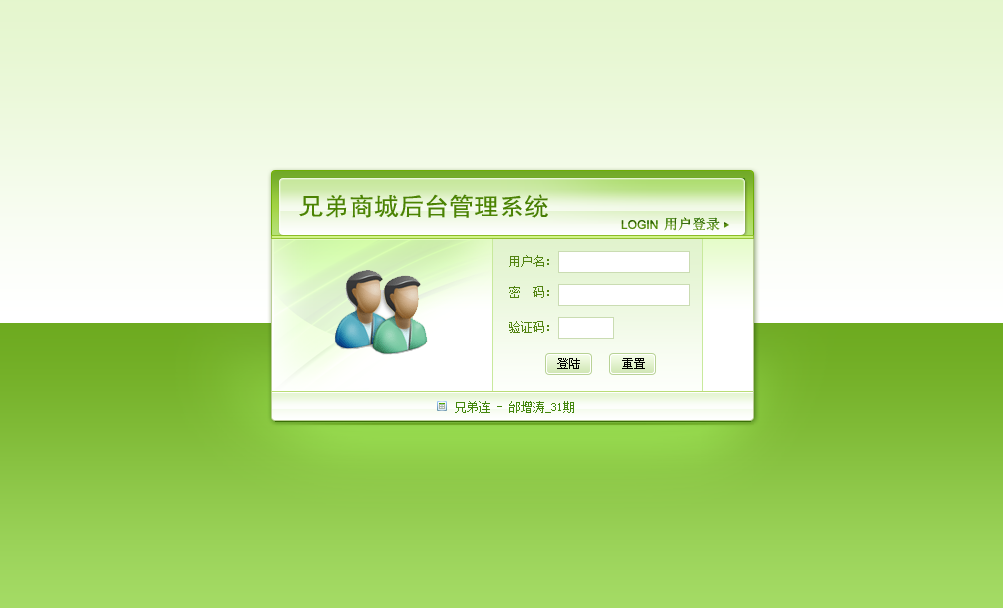
<style>
.page{position:relative;width:1003px;height:608px}
.page>*{position:absolute;margin:0}
.t1{font:25px "FZHTJW--GB1-0";color:#4b8303}
.t2{font:12px "ArialMT"}
.t3{font:14px "SimSun"}
.t4{font:12px "SimSun";color:#528311}
.t5{font:12px "SimSun";color:#000000}
.t6{font:12px "SimSun";color:#43860c}
</style>
<div class="page">
<p class="t1" style="left:299px;top:194px;width:249px;height:24px">兄弟商城后台管理系统</p>
<p class="t2" style="left:621px;top:220px;width:37px;height:10px">LOGIN</p>
<p class="t3" style="left:664px;top:217px;width:56px;height:14px">用户登录</p>
<p class="t4" style="left:509px;top:255px;width:40px;height:12px">用户名：</p>
<p class="t4" style="left:509px;top:286px;width:40px;height:12px">密　码：</p>
<p class="t4" style="left:509px;top:321px;width:40px;height:12px">验证码：</p>
<p class="t5" style="left:557px;top:358px;width:23px;height:11px">登陆</p>
<p class="t5" style="left:622px;top:358px;width:23px;height:11px">重置</p>
<p class="t6" style="left:455px;top:401px;width:119px;height:12px">兄弟连 - 邰增涛_31期</p>
</div>
